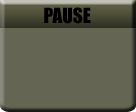
<style>
.page{position:relative;width:136px;height:112px;background:#656554}
.page>*{position:absolute;margin:0}
.t1{font:19.2px "Impact";color:#000000}
</style>
<div class="page">
<p class="t1" style="left:44px;top:7px;width:47px;height:17px">PAUSE</p>
</div>
